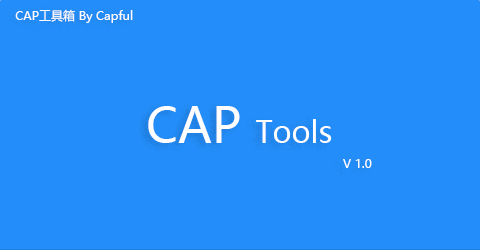
<style>
.page{position:relative;width:480px;height:250px;background:#238efa}
.page>*{position:absolute;margin:0}
.t1{font:12px "MicrosoftYaHei";color:#fefefe}
.t2{font:30px "MicrosoftYaHei";color:#fefefe}
.t3{font:48px "MicrosoftYaHei";color:#fefefe}
</style>
<div class="page">
<p class="t1" style="left:15px;top:9px;width:118px;height:14px">CAP工具箱 By Capful</p>
<p class="t2" style="left:148px;top:106px;width:184px;height:37px"><span class="t3">CAP </span>Tools</p>
<p class="t1" style="left:343px;top:159px;width:29px;height:9px">V 1.0</p>
</div>
